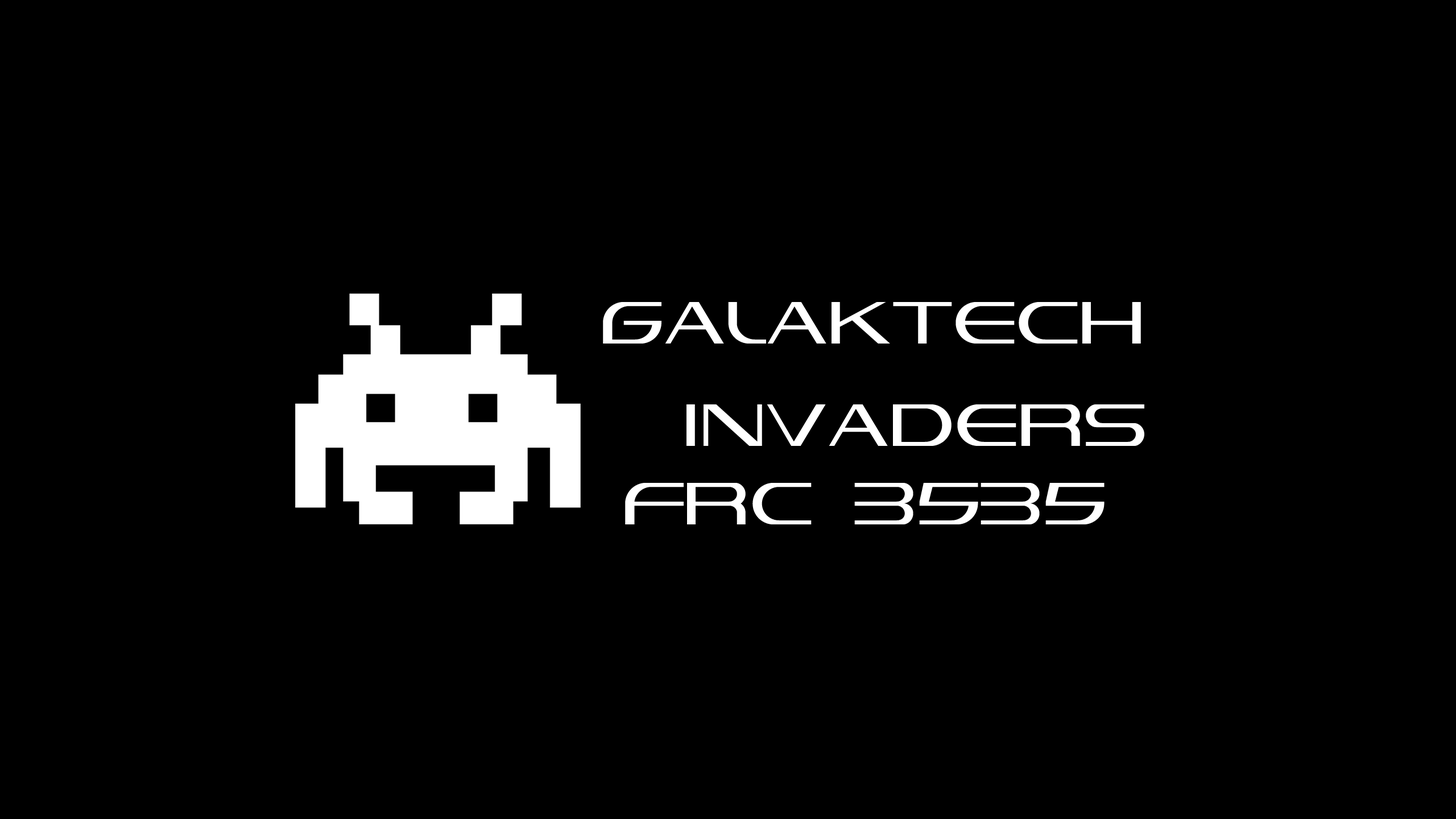
<style>
.page{position:relative;width:1456px;height:819px;background:#000000}
.page>*{position:absolute;margin:0}
.t1{font:85.3px "VandianaPlatinLite";color:#ffffff}
</style>
<div class="page">
<p class="t1" style="left:603px;top:302px;width:541px;height:144px">GalakTech<br>  Invaders</p>
<p class="t1" style="left:625px;top:483px;width:479px;height:41px">FRC 3535</p>
</div>
